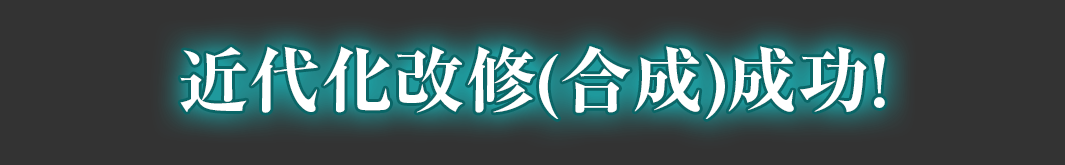
<style>
.page{position:relative;width:1065px;height:165px;background:#333333}
.page>*{position:absolute;margin:0}
.t1{font:72px "RyuminPr6N-ExBold";color:#ffffff}
</style>
<div class="page">
<p class="t1" style="left:180px;top:46px;width:705px;height:73px">近代化改修(合成)成功!</p>
</div>
